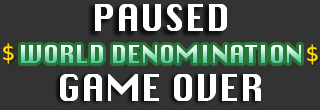
<style>
.page{position:relative;width:320px;height:110px;background:#333333}
.page>*{position:absolute;margin:0}
.t1{font:24px "Silom"}
.t2{font:36px "Silom";color:#ffffff}
</style>
<div class="page">
<p class="t1" style="left:21px;top:45px;width:280px;height:18px">WORLD DENOMINATION</p>
<p class="t2" style="left:60px;top:74px;width:201px;height:27px">GAME OVER</p>
</div>
